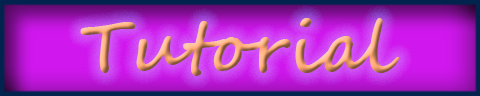
<style>
.page{position:relative;width:480px;height:96px}
.page>*{position:absolute;margin:0}
.t1{font:70.9px "SegoeScript-Bold"}
</style>
<div class="page">
<p class="t1" style="left:80px;top:18px;width:319px;height:58px">Tutorial</p>
</div>
